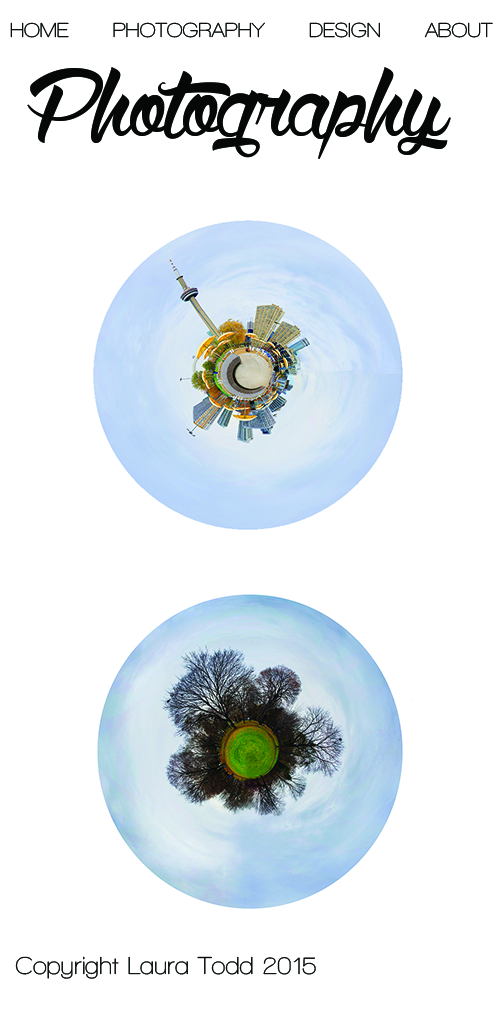
<style>
.page{position:relative;width:500px;height:1029px;background:#ffffff}
.page>*{position:absolute;margin:0}
.t1{font:20.7px "WalkwaySemiBold";color:#060808}
.t2{font:158.6px "WolfintheCity";color:#060808}
.t3{font:25px "WalkwaySemiBold";color:#060808}
</style>
<div class="page">
<p class="t1" style="left:10px;top:22px;width:483px;height:16px">HOME      PHOTOGRAPHY      DESIGN      ABOUT</p>
<p class="t2" style="left:27px;top:67px;width:424px;height:92px">Photography</p>
<p class="t3" style="left:15px;top:956px;width:301px;height:23px">Copyright Laura Todd 2015</p>
</div>
